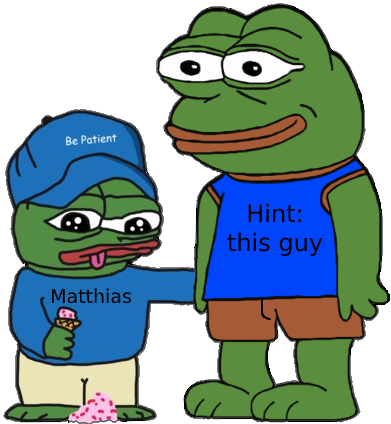
<style>
.page{position:relative;width:391px;height:424px;background:#ffffff}
.page>*{position:absolute;margin:0}
.t1{font:24px "DejaVuSans";color:#000000}
.t2{font:19px "DejaVuSans";color:#000000}
</style>
<div class="page">
<p class="t1" style="left:227px;top:203px;width:96px;height:53px;text-align:center">Hint:<br>this guy</p>
<p class="t2" style="left:51px;top:288px;width:80px;height:16px">Matthias</p>
</div>
